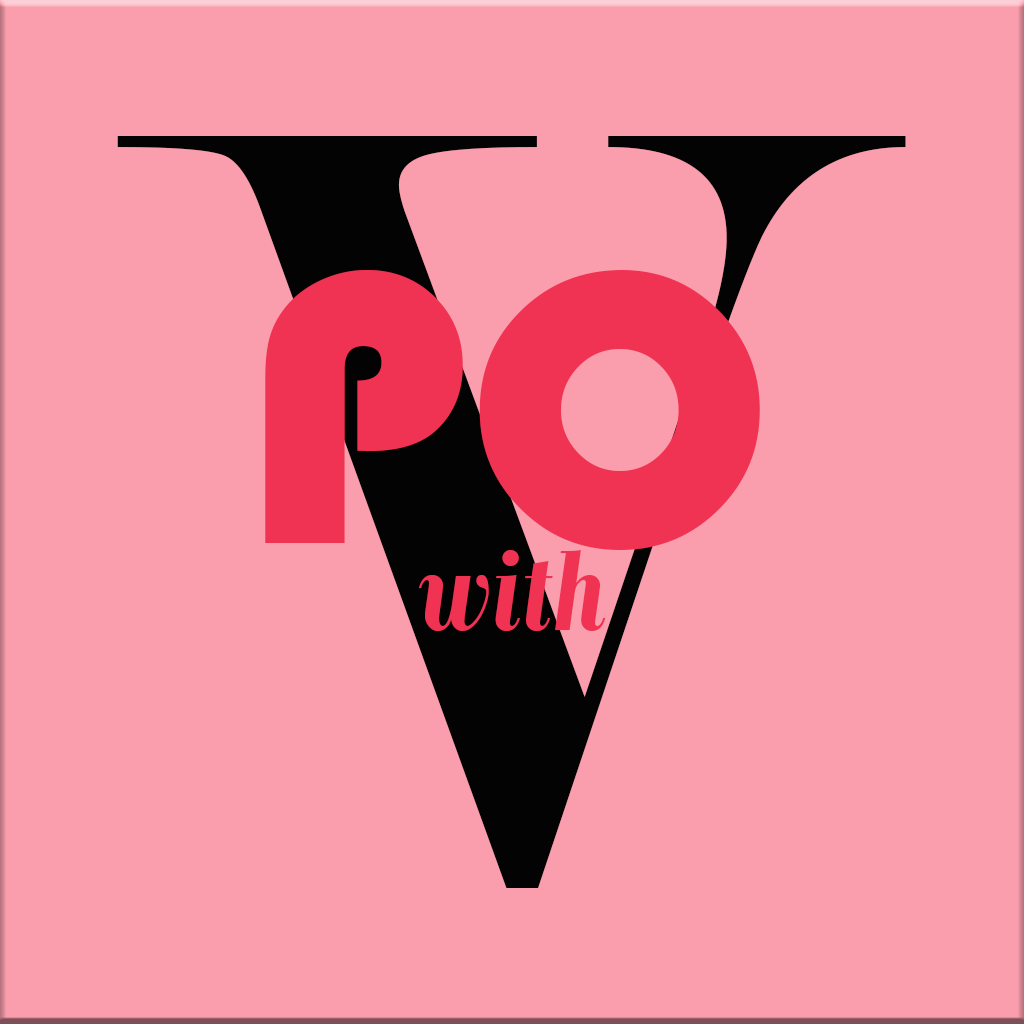
<style>
.page{position:relative;width:1024px;height:1024px;background:#fa9ead}
.page>*{position:absolute;margin:0}
.t1{font:1150px "Modern-Regular";color:#030303}
.t2{font:400px "Bauhaus93";color:#f13353}
.t3{font:125px "BodoniMTCondensed-BoldItalic";color:#f13353}
</style>
<div class="page">
<p class="t1" style="left:117px;top:136px;width:789px;height:752px">V</p>
<p class="t2" style="left:265px;top:270px;width:495px;height:280px">PO</p>
<p class="t3" style="left:418px;top:550px;width:188px;height:81px">with</p>
</div>
